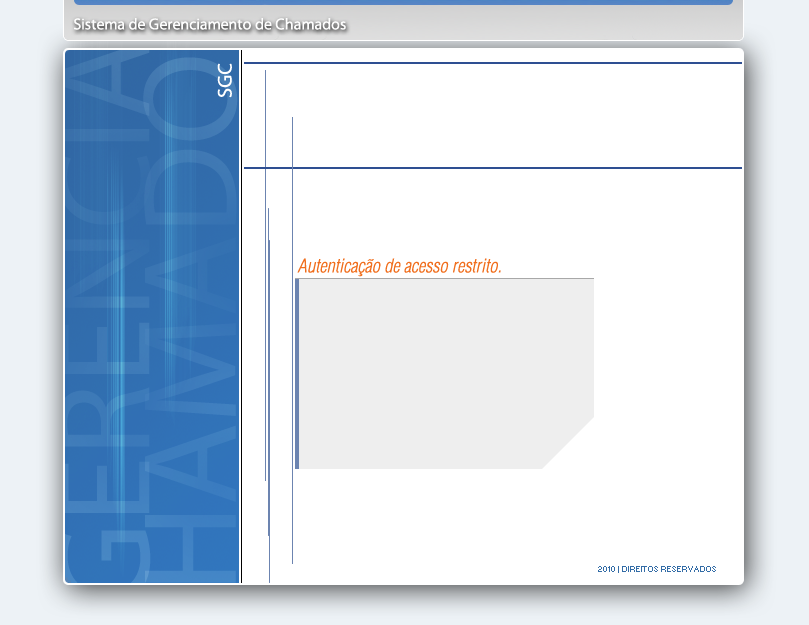
<style>
.page{position:relative;width:809px;height:625px;background:#ffffff}
.page>*{position:absolute;margin:0}
.t1{font:16px "MyriadPro-Regular";color:#fefefe}
.t2{font:20px "MyriadPro-Regular";color:#ffffff;text-transform:uppercase}
.t3{font:18.5px "Helvetica-Condensed-LightObl";color:#f06e1d}
.t4{font:8px "Small Fonts";color:#336ca6}
</style>
<div class="page">
<p class="t1" style="left:74px;top:18px;width:272px;height:12px">Sistema de Gerenciamento de Chamados</p>
<p class="t2" style="left:217px;top:63px;width:15px;height:35px;rotate:-90deg">SGC</p>
<p class="t3" style="left:297px;top:258px;width:204px;height:19px">Autenticação de acesso restrito.</p>
<p class="t4" style="left:598px;top:566px;width:118px;height:7px">2010 | DIREITOS RESERVADOS</p>
</div>
